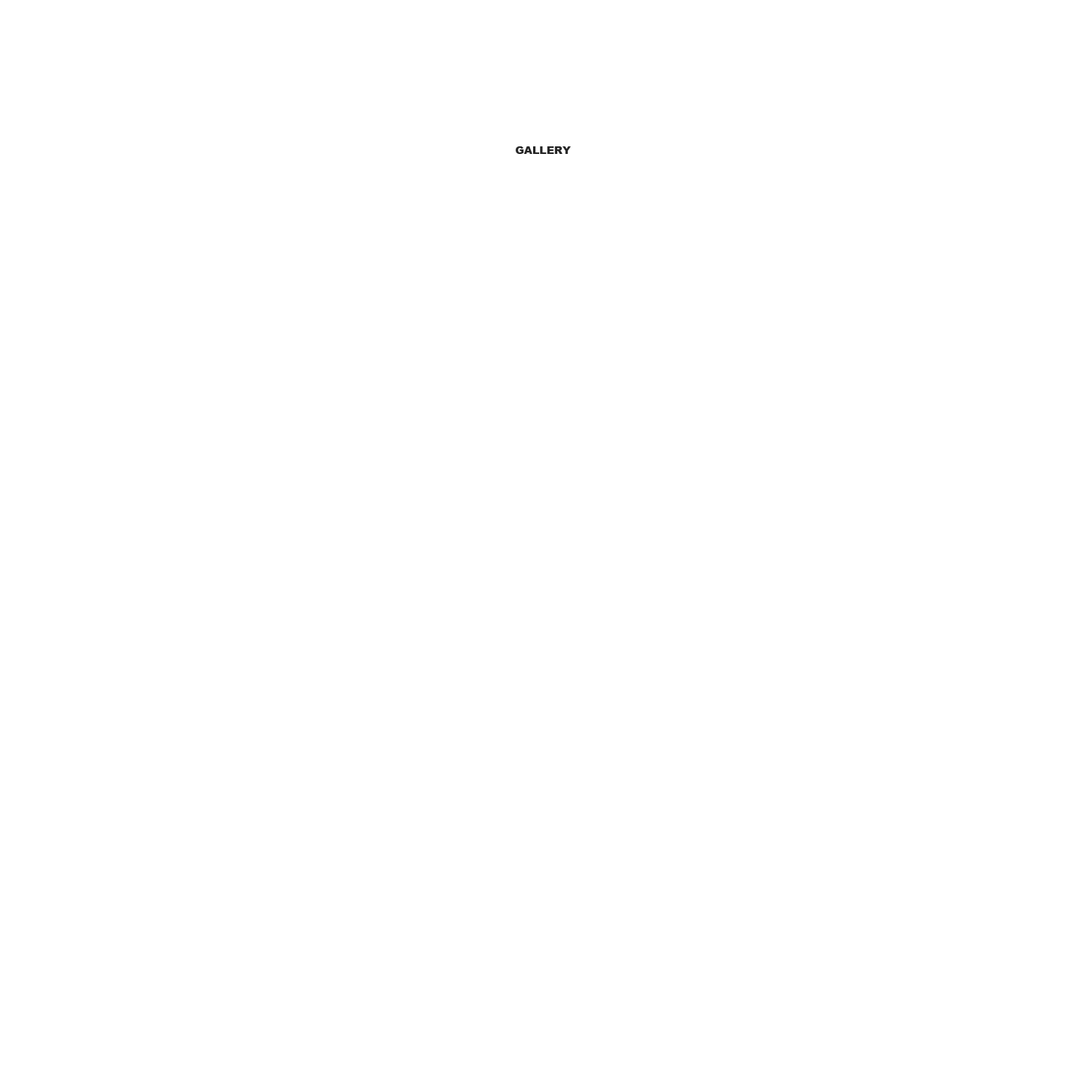
<style>
.page{position:relative;width:1092px;height:1092px;background:#ffffff}
.page>*{position:absolute;margin:0}
.t1{font:10.6px "Arial-Black";color:#252525}
</style>
<div class="page">
<p class="t1" style="left:516px;top:146px;width:55px;height:8px">GALLERY</p>
</div>
